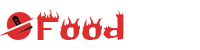
<style>
.page{position:relative;width:200px;height:50px;background:#ffffff}
.page>*{position:absolute;margin:0}
.t1{font:37.5px "Flame";color:#db2e2e}
</style>
<div class="page">
<p class="t1" style="left:37px;top:10px;width:87px;height:30px">Food</p>
</div>
